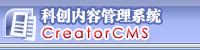
<style>
.page{position:relative;width:200px;height:50px}
.page>*{position:absolute;margin:0}
.t1{font:15px "FZCSJW--GB1-0";color:#ffffff}
.t2{font:14px "STXihei";letter-spacing:0.2em}
</style>
<div class="page">
<p class="t1" style="left:41px;top:8px;width:120px;height:16px">科创内容管理系统</p>
<p class="t2" style="left:42px;top:27px;width:106px;height:12px">CreatorCMS</p>
</div>
